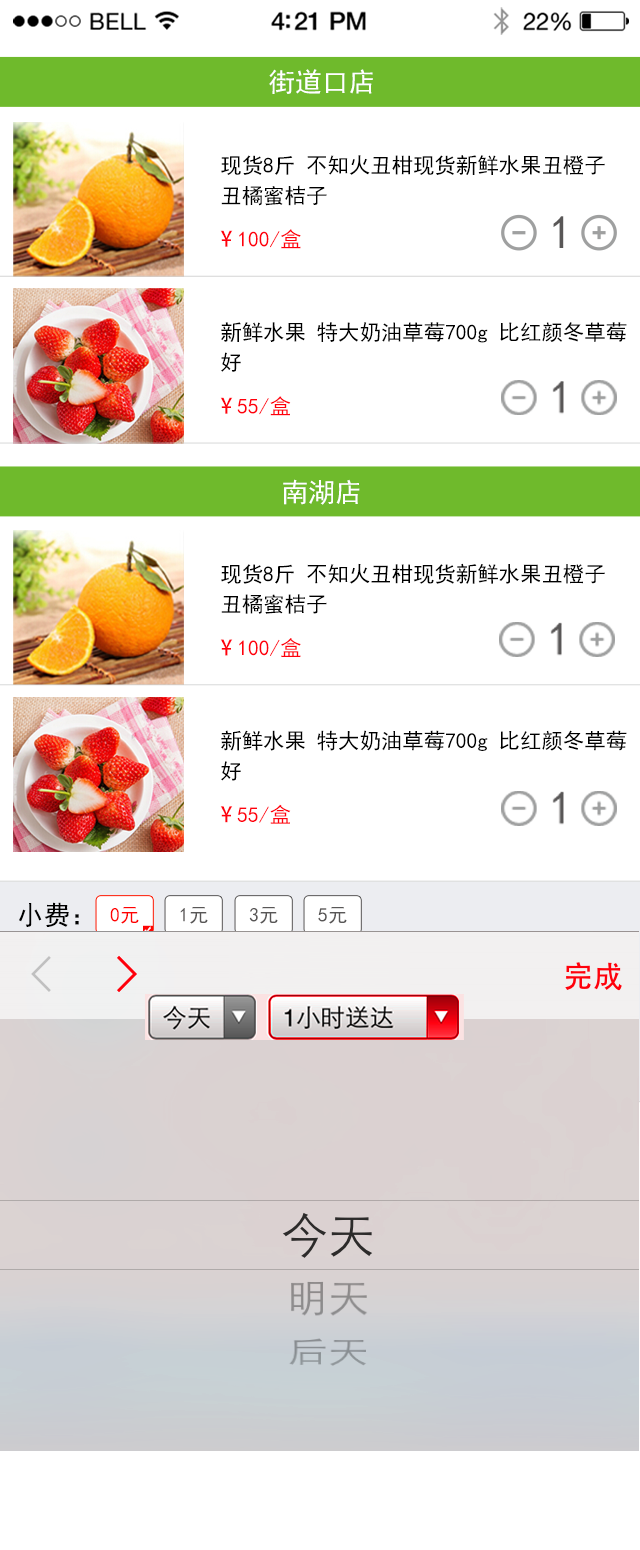
<style>
.page{position:relative;width:640px;height:1550px;background:#ffffff}
.page>*{position:absolute;margin:0}
.t1{font:26.8px "SimHei";color:#ffffff}
.t2{font:21.4px/30.3px "SimHei";color:#000000}
.t3{font:47px "SimHei";color:#595757}
.t4{font:21.4px "SimHei";color:#ff000c}
.t5{font:21.4px "AdobeHeitiStd-Regular";color:#ff000c}
.t6{font:26.8px "SimHei";color:#000000}
.t7{font:19.6px "SimHei";color:#fe0202}
.t8{font:19.6px "SimHei";color:#595757}
</style>
<div class="page">
<p class="t1" style="left:269px;top:69px;width:104px;height:25px">街道口店</p>
<p class="t2" style="left:221px;top:155px;width:384px;height:51px">现货8斤 不知火丑柑现货新鲜水果丑橙子 <br>丑橘蜜桔子</p>
<p class="t3" style="left:553px;top:216px;width:11px;height:32px">1</p>
<p class="t4" style="left:220px;top:229px;width:81px;height:20px"><span class="t5">¥ </span>100/盒</p>
<p class="t2" style="left:221px;top:322px;width:406px;height:50px">新鲜水果 特大奶油草莓700g 比红颜冬草莓<br>好</p>
<p class="t4" style="left:220px;top:396px;width:71px;height:20px"><span class="t5">¥ </span>55/盒</p>
<p class="t1" style="left:283px;top:479px;width:77px;height:26px">南湖店</p>
<p class="t2" style="left:221px;top:563px;width:384px;height:51px">现货8斤 不知火丑柑现货新鲜水果丑橙子 <br>丑橘蜜桔子</p>
<p class="t4" style="left:220px;top:638px;width:81px;height:19px"><span class="t5">¥ </span>100/盒</p>
<p class="t2" style="left:221px;top:730px;width:406px;height:51px">新鲜水果 特大奶油草莓700g 比红颜冬草莓<br>好</p>
<p class="t4" style="left:220px;top:804px;width:71px;height:20px"><span class="t5">¥ </span>55/盒</p>
<p class="t6" style="left:19px;top:902px;width:60px;height:25px">小费：</p>
<p class="t7" style="left:110px;top:907px;width:29px;height:17px">0元</p>
<p class="t8" style="left:180px;top:907px;width:28px;height:17px">1元</p>
<p class="t8" style="left:249px;top:907px;width:29px;height:17px">3元</p>
<p class="t8" style="left:318px;top:907px;width:29px;height:17px">5元</p>
</div>
